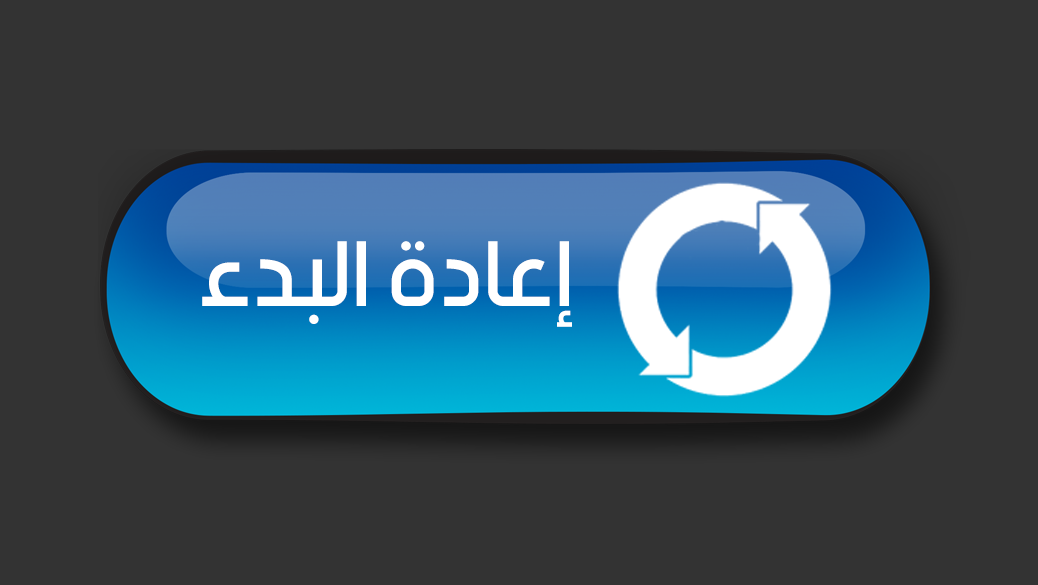
<style>
.page{position:relative;width:1038px;height:585px;background:#333333}
.page>*{position:absolute;margin:0}
.t1{font:98.5px "beINNormal";color:#ffffff}
</style>
<div class="page">
<p class="t1" style="left:202px;top:241px;width:370px;height:86px">إعادة البدء</p>
</div>
